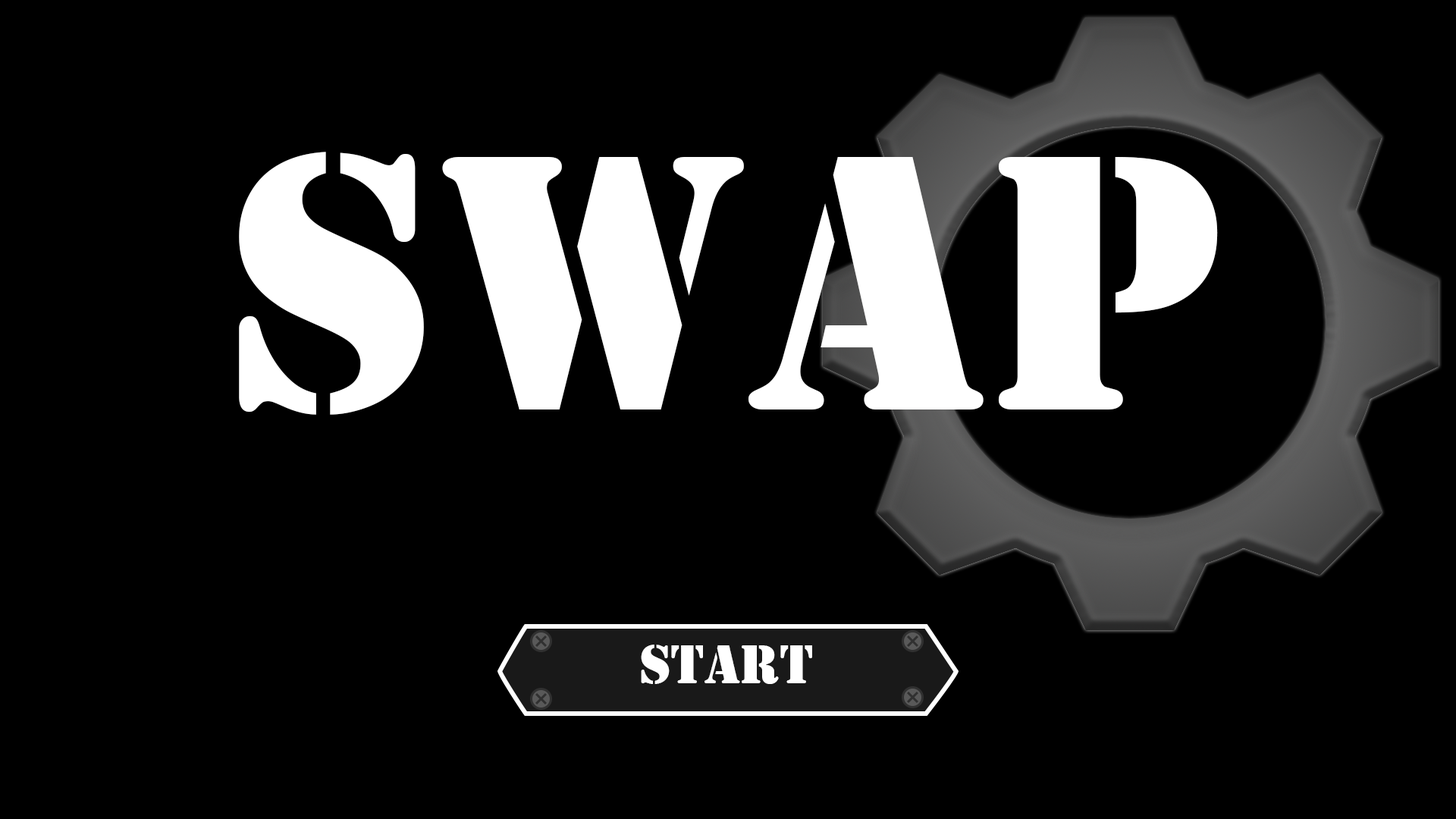
<style>
.page{position:relative;width:1456px;height:819px;background:#000000}
.page>*{position:absolute;margin:0}
.t1{font:379.2px "Stencil";color:#ffffff}
.t2{font:56.9px "Stencil";color:#ffffff}
</style>
<div class="page">
<p class="t1" style="left:239px;top:152px;width:979px;height:263px">Swap</p>
<p class="t2" style="left:641px;top:645px;width:171px;height:39px">Start</p>
</div>
